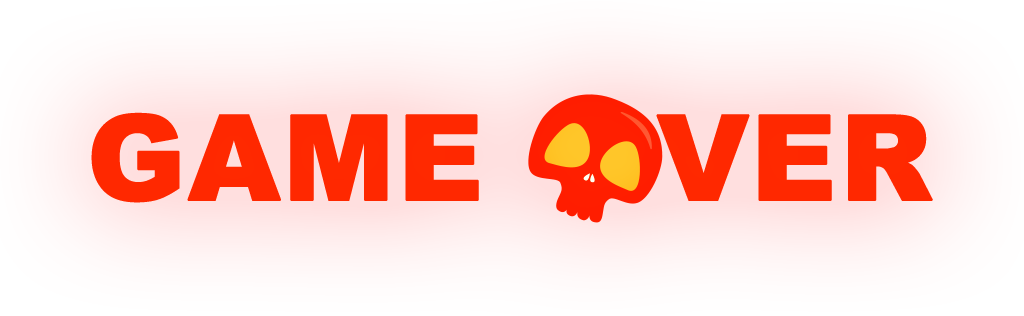
<style>
.page{position:relative;width:1024px;height:316px}
.page>*{position:absolute;margin:0}
.t1{font:118.3px "Arial-Black";color:#ff2a00;font-weight:bold}
</style>
<div class="page">
<p class="t1" style="left:91px;top:112px;width:842px;height:91px">GAME    VER</p>
</div>
